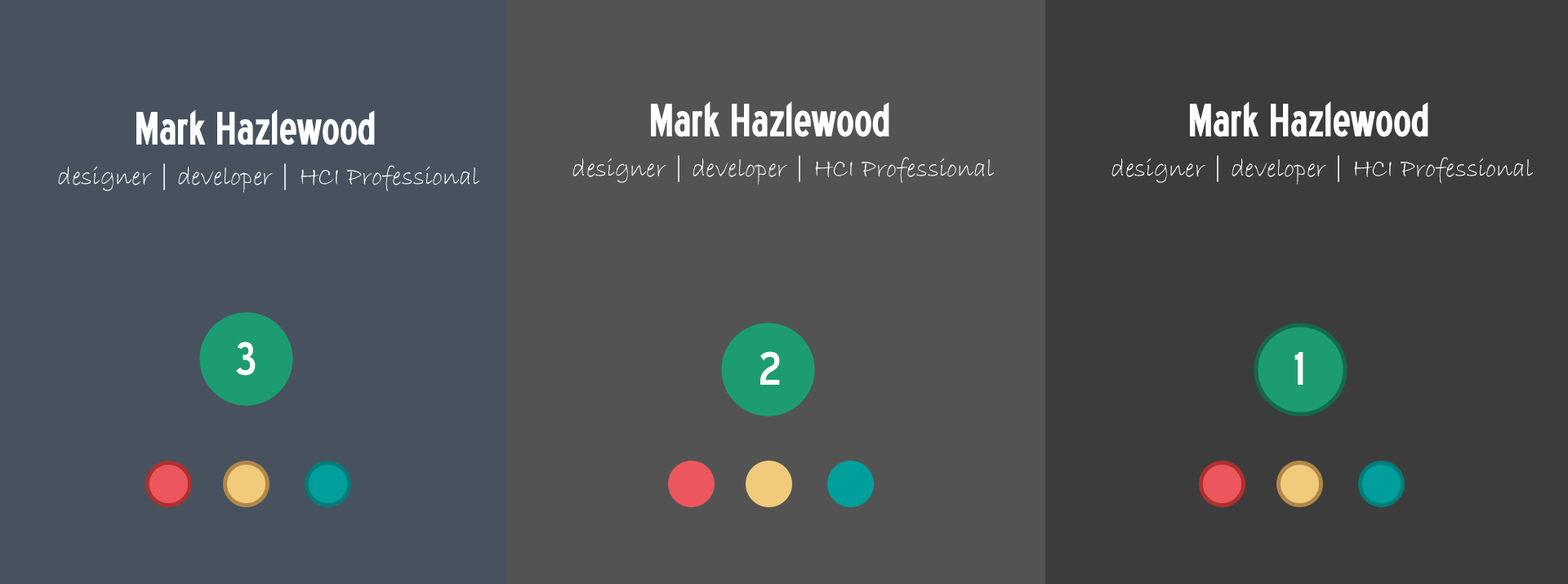
<style>
.page{position:relative;width:1568px;height:584px;background:#535353}
.page>*{position:absolute;margin:0}
.t1{font:58.8px "BlueHighwayCondensed";color:#fdffff;scale:1.19 1}
.t2{font:26.1px "BradleyHandITC";color:#fdffff}
.t3{font:58.8px "BlueHighway";color:#ffffff}
</style>
<div class="page">
<p class="t1" style="left:651px;top:101px;width:238px;height:36px">Mark Hazlewood</p>
<p class="t1" style="left:1190px;top:101px;width:238px;height:36px">Mark Hazlewood</p>
<p class="t1" style="left:136px;top:109px;width:239px;height:36px">Mark Hazlewood</p>
<p class="t2" style="left:572px;top:155px;width:422px;height:30px">designer | developer | HCI Professional</p>
<p class="t2" style="left:1111px;top:155px;width:422px;height:30px">designer | developer | HCI Professional</p>
<p class="t2" style="left:58px;top:163px;width:421px;height:30px">designer | developer | HCI Professional</p>
<p class="t3" style="left:236px;top:341px;width:20px;height:35px">3</p>
<p class="t3" style="left:760px;top:351px;width:20px;height:34px">2</p>
<p class="t3" style="left:1294px;top:352px;width:9px;height:33px">1</p>
</div>
